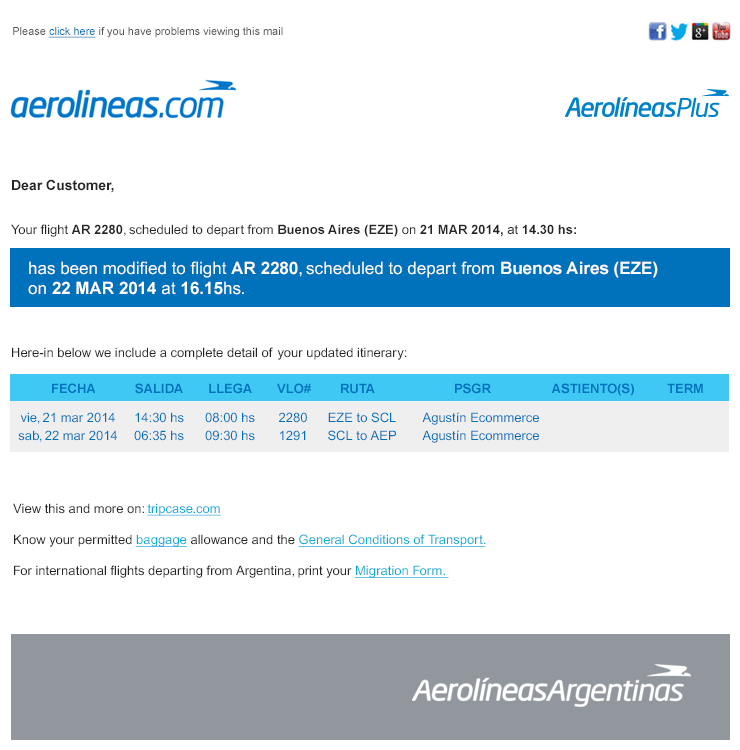
<style>
.page{position:relative;width:740px;height:750px;background:#ffffff}
.page>*{position:absolute;margin:0}
.t1{font:11px "ArialMT";color:#555555}
.t2{font:11px "ArialMT";color:#006eb5;text-decoration:underline}
.t3{font:13px "ArialMT";color:#252525}
.t4{font:14px "Arial-BoldMT";color:#252525}
.t5{font:13px "Arial-BoldMT";color:#252525}
.t6{font:17px "ArialMT";color:#ffffff}
.t7{font:17px "Arial-BoldMT";color:#ffffff}
.t8{font:13px "Arial-BoldMT";color:#0071bb}
.t9{font:13px/18px "ArialMT";color:#0071bb}
.t10{font:13px "ArialMT";color:#08abd4;text-decoration:underline}
</style>
<div class="page">
<p class="t1" style="left:13px;top:27px;width:270px;height:11px">Please <span class="t2">click here </span>if you have problems viewing this mail</p>
<p class="t3" style="left:11px;top:179px;width:565px;height:58px"><span class="t4">Dear Customer,<br><br><br></span>Your flight <span class="t5">AR 2280</span>, scheduled to depart from<span class="t5"> Buenos Aires (EZE)</span> on <span class="t5">21 MAR 2014, </span>at <span class="t5">14.30 hs:</span></p>
<p class="t6" style="left:28px;top:261px;width:630px;height:34px">has been modified to flight <span class="t7">AR 2280</span>, scheduled to depart from <span class="t7">Buenos Aires (EZE)<br></span>on <span class="t7">22 MAR 2014</span> at <span class="t7">16.15</span>hs.</p>
<p class="t3" style="left:12px;top:347px;width:395px;height:13px">Here-in below we include a complete detail of your updated itinerary:</p>
<p class="t8" style="left:52px;top:383px;width:651px;height:13px">FECHA           SALIDA       LLEGA       VLO#        RUTA                      PSGR                 ASTIENTO(S)         TERM</p>
<p class="t9" style="left:18px;top:412px;width:100px;height:30px;text-align:center">vie, 21 mar 2014<br>sab, 22 mar 2014</p>
<p class="t9" style="left:134px;top:412px;width:50px;height:29px;text-align:center">14:30 hs<br>06:35 hs</p>
<p class="t9" style="left:205px;top:412px;width:50px;height:29px;text-align:center">08:00 hs<br>09:30 hs</p>
<p class="t9" style="left:279px;top:412px;width:28px;height:29px;text-align:center">2280<br>1291</p>
<p class="t9" style="left:328px;top:412px;width:68px;height:29px;text-align:center">EZE to SCL<br>SCL to AEP</p>
<p class="t9" style="left:422px;top:412px;width:117px;height:31px;text-align:center">Agustín Ecommerce<br>Agustín Ecommerce</p>
<p class="t3" style="left:13px;top:503px;width:473px;height:75px">View this and more on: <span class="t10">tripcase.com<br><br></span>Know your permitted <span class="t10">baggage </span>allowance and the <span class="t10">General Conditions of Transport.<br><br></span>For international flights departing from Argentina, print your <span class="t10">Migration Form.</span></p>
</div>
